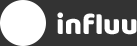
<style>
.page{position:relative;width:137px;height:46px;background:#333333}
.page>*{position:absolute;margin:0}
.t1{font:30px "Baloo";color:#ffffff}
</style>
<div class="page">
<p class="t1" style="left:57px;top:12px;width:80px;height:23px">influu</p>
</div>
